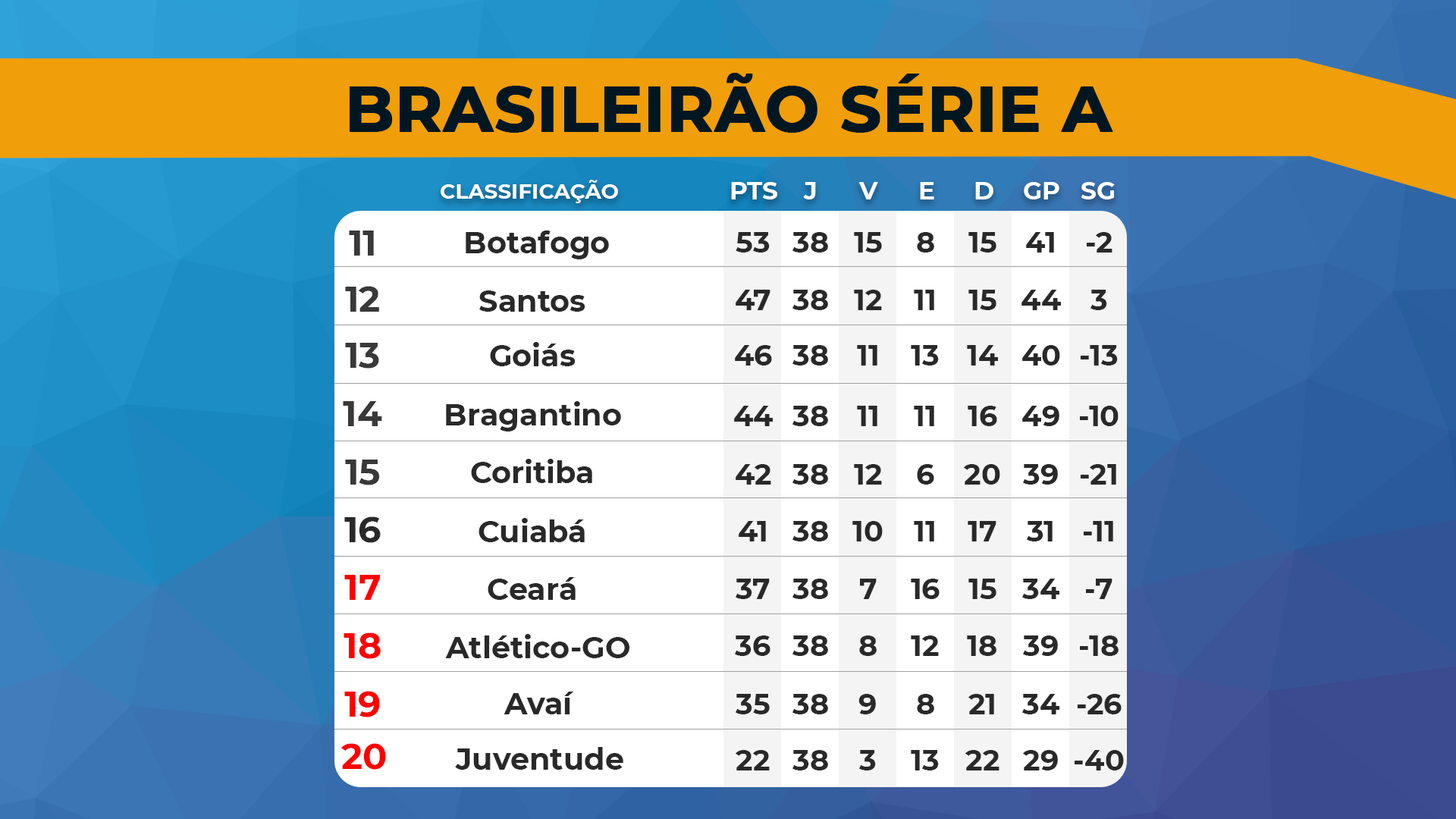
<style>
.page{position:relative;width:1456px;height:819px;background:#ffffff}
.page>*{position:absolute;margin:0}
.t1{font:63.7px "Montserrat-Bold";color:#001621;text-transform:uppercase;font-weight:bold}
.t2{font:21.1px "Montserrat-Bold";color:#ffffff}
.t3{font:24.8px "Montserrat-Bold";color:#ffffff}
.t4{font:36.2px "Montserrat-Bold";color:#393939}
.t5{font:30.1px "Montserrat-Bold";color:#292929}
.t6{font:28.9px "Montserrat-Bold";color:#292929}
.t7{font:36.2px "Montserrat-Bold";color:#292929}
.t8{font:36.2px "Montserrat-Bold";color:#ff0000}
</style>
<div class="page">
<p class="t1" style="left:350px;top:73px;width:763px;height:60px">BRASILEIRÃO SÉRIE A</p>
<p class="t2" style="left:441px;top:180px;width:177px;height:23px">CLASSIFICAÇÃO</p>
<p class="t3" style="left:731px;top:182px;width:46px;height:17px">PTS</p>
<p class="t3" style="left:803px;top:182px;width:13px;height:17px">J</p>
<p class="t3" style="left:858px;top:182px;width:20px;height:17px">V</p>
<p class="t3" style="left:920px;top:182px;width:14px;height:17px">E</p>
<p class="t3" style="left:975px;top:182px;width:18px;height:17px">D</p>
<p class="t3" style="left:1024px;top:182px;width:35px;height:17px">GP</p>
<p class="t3" style="left:1081px;top:182px;width:34px;height:17px">SG</p>
<p class="t4" style="left:349px;top:231px;width:25px;height:25px">11</p>
<p class="t5" style="left:466px;top:231px;width:143px;height:28px">Botafogo</p>
<p class="t6" style="left:736px;top:232px;width:34px;height:21px">53</p>
<p class="t6" style="left:792px;top:232px;width:36px;height:21px">38</p>
<p class="t6" style="left:854px;top:232px;width:28px;height:21px">15</p>
<p class="t6" style="left:917px;top:232px;width:17px;height:21px">8</p>
<p class="t6" style="left:968px;top:232px;width:28px;height:21px">15</p>
<p class="t6" style="left:1026px;top:232px;width:28px;height:21px">41</p>
<p class="t6" style="left:1087px;top:232px;width:25px;height:21px">-2</p>
<p class="t4" style="left:345px;top:286px;width:34px;height:26px">12</p>
<p class="t5" style="left:479px;top:290px;width:106px;height:22px">Santos</p>
<p class="t6" style="left:736px;top:290px;width:34px;height:20px">47</p>
<p class="t6" style="left:792px;top:290px;width:36px;height:20px">38</p>
<p class="t6" style="left:854px;top:290px;width:28px;height:20px">12</p>
<p class="t6" style="left:914px;top:290px;width:20px;height:20px">11</p>
<p class="t6" style="left:968px;top:290px;width:28px;height:20px">15</p>
<p class="t6" style="left:1021px;top:290px;width:40px;height:20px">44</p>
<p class="t6" style="left:1090px;top:290px;width:17px;height:20px">3</p>
<p class="t4" style="left:345px;top:343px;width:34px;height:26px">13</p>
<p class="t5" style="left:490px;top:342px;width:86px;height:24px">Goiás</p>
<p class="t6" style="left:735px;top:345px;width:37px;height:21px">46</p>
<p class="t6" style="left:792px;top:345px;width:36px;height:21px">38</p>
<p class="t6" style="left:857px;top:345px;width:20px;height:21px">11</p>
<p class="t6" style="left:911px;top:345px;width:28px;height:21px">13</p>
<p class="t6" style="left:967px;top:345px;width:31px;height:21px">14</p>
<p class="t6" style="left:1022px;top:345px;width:38px;height:21px">40</p>
<p class="t6" style="left:1081px;top:345px;width:37px;height:21px">-13</p>
<p class="t4" style="left:343px;top:401px;width:39px;height:25px">14</p>
<p class="t5" style="left:446px;top:401px;width:175px;height:30px">Bragantino</p>
<p class="t6" style="left:734px;top:406px;width:39px;height:20px">44</p>
<p class="t6" style="left:792px;top:406px;width:36px;height:20px">38</p>
<p class="t6" style="left:857px;top:406px;width:20px;height:20px">11</p>
<p class="t6" style="left:914px;top:406px;width:20px;height:20px">11</p>
<p class="t6" style="left:968px;top:406px;width:29px;height:20px">16</p>
<p class="t6" style="left:1022px;top:406px;width:37px;height:20px">49</p>
<p class="t6" style="left:1080px;top:406px;width:39px;height:20px">-10</p>
<p class="t4" style="left:345px;top:460px;width:35px;height:25px">15</p>
<p class="t5" style="left:471px;top:459px;width:121px;height:24px">Coritiba</p>
<p class="t6" style="left:736px;top:464px;width:35px;height:21px">42</p>
<p class="t6" style="left:792px;top:464px;width:36px;height:21px">38</p>
<p class="t6" style="left:854px;top:464px;width:28px;height:21px">12</p>
<p class="t6" style="left:917px;top:464px;width:17px;height:21px">6</p>
<p class="t6" style="left:964px;top:464px;width:36px;height:21px">20</p>
<p class="t6" style="left:1023px;top:464px;width:35px;height:21px">39</p>
<p class="t6" style="left:1081px;top:464px;width:35px;height:21px">-21</p>
<p class="t7" style="left:344px;top:516px;width:37px;height:27px">16</p>
<p class="t5" style="left:479px;top:518px;width:106px;height:24px">Cuiabá</p>
<p class="t6" style="left:739px;top:521px;width:27px;height:20px">41</p>
<p class="t6" style="left:792px;top:521px;width:36px;height:20px">38</p>
<p class="t6" style="left:852px;top:521px;width:31px;height:20px">10</p>
<p class="t6" style="left:914px;top:521px;width:20px;height:20px">11</p>
<p class="t6" style="left:968px;top:521px;width:28px;height:20px">17</p>
<p class="t6" style="left:1027px;top:521px;width:26px;height:20px">31</p>
<p class="t6" style="left:1084px;top:521px;width:29px;height:20px">-11</p>
<p class="t8" style="left:344px;top:575px;width:36px;height:25px">17</p>
<p class="t5" style="left:488px;top:577px;width:88px;height:23px">Ceará</p>
<p class="t6" style="left:736px;top:579px;width:34px;height:20px">37</p>
<p class="t6" style="left:792px;top:579px;width:36px;height:20px">38</p>
<p class="t6" style="left:860px;top:579px;width:17px;height:20px">7</p>
<p class="t6" style="left:911px;top:579px;width:29px;height:20px">16</p>
<p class="t6" style="left:968px;top:579px;width:28px;height:20px">15</p>
<p class="t6" style="left:1022px;top:579px;width:37px;height:20px">34</p>
<p class="t6" style="left:1086px;top:579px;width:26px;height:20px">-7</p>
<p class="t8" style="left:344px;top:632px;width:37px;height:27px">18</p>
<p class="t5" style="left:445px;top:634px;width:184px;height:24px">Atlético-GO</p>
<p class="t6" style="left:735px;top:635px;width:35px;height:21px">36</p>
<p class="t6" style="left:792px;top:635px;width:36px;height:21px">38</p>
<p class="t6" style="left:859px;top:635px;width:18px;height:21px">8</p>
<p class="t6" style="left:911px;top:635px;width:28px;height:21px">12</p>
<p class="t6" style="left:967px;top:635px;width:29px;height:21px">18</p>
<p class="t6" style="left:1023px;top:635px;width:35px;height:21px">39</p>
<p class="t6" style="left:1080px;top:635px;width:39px;height:21px">-18</p>
<p class="t8" style="left:344px;top:691px;width:36px;height:26px">19</p>
<p class="t5" style="left:504px;top:692px;width:70px;height:22px">Avaí</p>
<p class="t6" style="left:736px;top:694px;width:34px;height:20px">35</p>
<p class="t6" style="left:792px;top:694px;width:36px;height:20px">38</p>
<p class="t6" style="left:858px;top:694px;width:18px;height:20px">9</p>
<p class="t6" style="left:917px;top:694px;width:17px;height:20px">8</p>
<p class="t6" style="left:968px;top:694px;width:26px;height:20px">21</p>
<p class="t6" style="left:1022px;top:694px;width:37px;height:20px">34</p>
<p class="t6" style="left:1078px;top:694px;width:44px;height:20px">-26</p>
<p class="t8" style="left:341px;top:743px;width:45px;height:27px">20</p>
<p class="t5" style="left:455px;top:747px;width:168px;height:23px">Juventude</p>
<p class="t6" style="left:736px;top:750px;width:34px;height:20px">22</p>
<p class="t6" style="left:792px;top:750px;width:36px;height:20px">38</p>
<p class="t6" style="left:859px;top:750px;width:17px;height:20px">3</p>
<p class="t6" style="left:911px;top:750px;width:28px;height:20px">13</p>
<p class="t6" style="left:965px;top:750px;width:34px;height:20px">22</p>
<p class="t6" style="left:1023px;top:750px;width:35px;height:20px">29</p>
<p class="t6" style="left:1075px;top:750px;width:49px;height:20px">-40</p>
</div>
